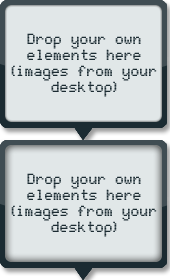
<style>
.page{position:relative;width:170px;height:280px;background:#e1e7e8}
.page>*{position:absolute;margin:0}
.t1{font:24.2px/16px "JD-LCD-Rounded";color:#1b2b32;font-weight:bold;scale:0.91 1}
</style>
<div class="page">
<p class="t1" style="left:11px;top:33px;width:146px;height:64px;text-align:center">Drop your own elements here<br>(images from your desktop)</p>
<p class="t1" style="left:11px;top:173px;width:146px;height:64px;text-align:center">Drop your own elements here<br>(images from your desktop)</p>
</div>
